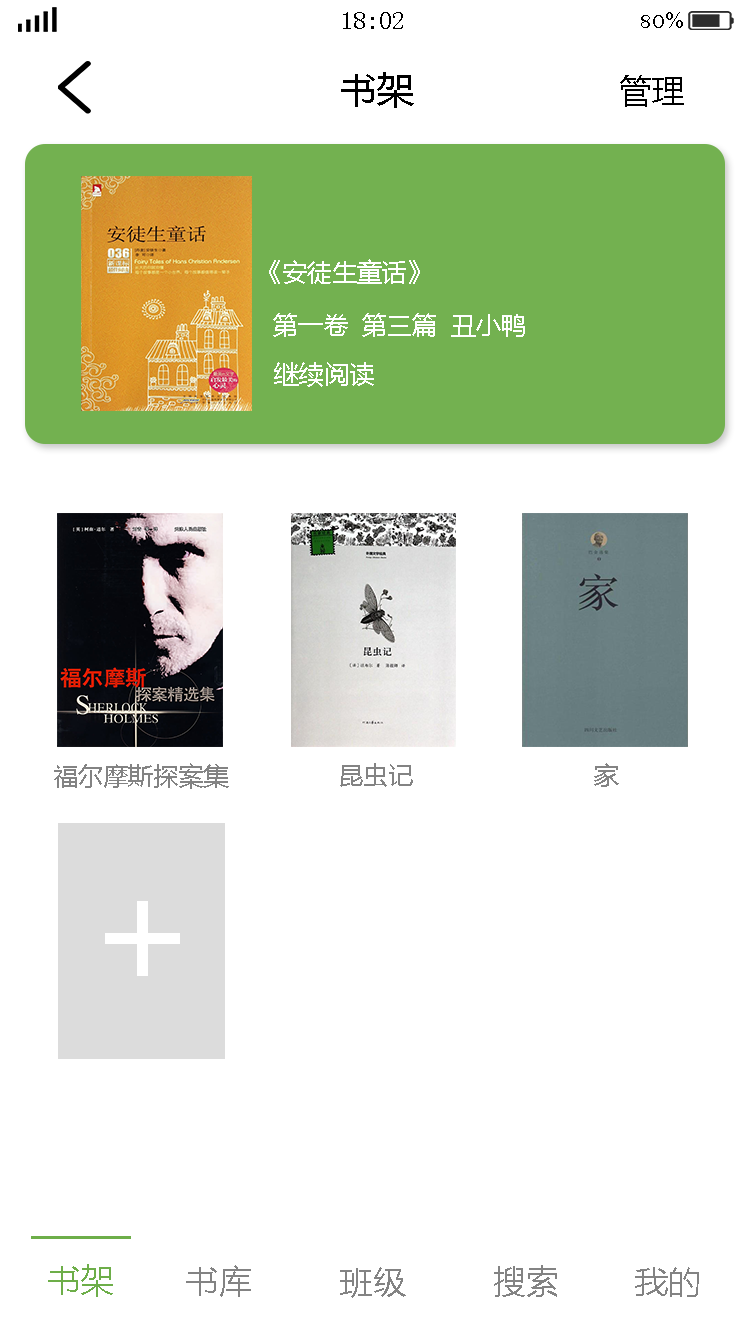
<style>
.page{position:relative;width:750px;height:1334px;background:#ffffff}
.page>*{position:absolute;margin:0}
.t1{font:25px "SimSun";color:#000000}
.t2{font:25px "BellMT";color:#000000}
.t3{font:37.5px "MicrosoftYaHei";color:#000000}
.t4{font:33.3px "MicrosoftYaHei";color:#000000}
.t5{font:25px "MicrosoftYaHei";color:#ffffff}
.t6{font:25px "MicrosoftYaHei";color:#838383}
.t7{font:150px "MicrosoftYaHei";color:#ffffff}
.t8{font:33.3px "MicrosoftYaHei";color:#6dae49}
.t9{font:33.3px "MicrosoftYaHei";color:#838383}
</style>
<div class="page">
<p class="t1" style="left:343px;top:12px;width:60px;height:17px">18:02</p>
<p class="t2" style="left:641px;top:12px;width:42px;height:16px">80%</p>
<p class="t3" style="left:341px;top:72px;width:73px;height:36px">书架</p>
<p class="t4" style="left:620px;top:75px;width:64px;height:32px">管理</p>
<p class="t5" style="left:269px;top:259px;width:151px;height:25px">《安徒生童话》</p>
<p class="t5" style="left:273px;top:313px;width:252px;height:24px">第一卷  第三篇  丑小鸭</p>
<p class="t5" style="left:274px;top:362px;width:100px;height:25px">继续阅读</p>
<p class="t6" style="left:54px;top:763px;width:175px;height:26px">福尔摩斯探案集</p>
<p class="t6" style="left:340px;top:763px;width:73px;height:24px">昆虫记</p>
<p class="t6" style="left:594px;top:763px;width:25px;height:24px">家</p>
<p class="t7" style="left:105px;top:901px;width:75px;height:75px">+</p>
<p class="t8" style="left:48px;top:1264px;width:65px;height:33px">书架</p>
<p class="t9" style="left:186px;top:1265px;width:65px;height:32px">书库</p>
<p class="t9" style="left:494px;top:1265px;width:63px;height:32px">搜索</p>
<p class="t9" style="left:340px;top:1267px;width:66px;height:31px">班级</p>
<p class="t9" style="left:635px;top:1267px;width:64px;height:30px">我的</p>
</div>
